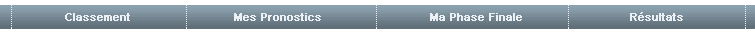
<style>
.page{position:relative;width:755px;height:34px;background:#ffffff}
.page>*{position:absolute;margin:0}
.t1{font:11px "ArialMT";color:#ebf0f5;font-weight:bold}
</style>
<div class="page">
<p class="t1" style="left:65px;top:13px;width:65px;height:8px">Classement</p>
<p class="t1" style="left:234px;top:13px;width:87px;height:8px">Mes Pronostics</p>
<p class="t1" style="left:430px;top:13px;width:92px;height:8px">Ma Phase Finale</p>
<p class="t1" style="left:630px;top:12px;width:53px;height:9px">Résultats</p>
</div>
